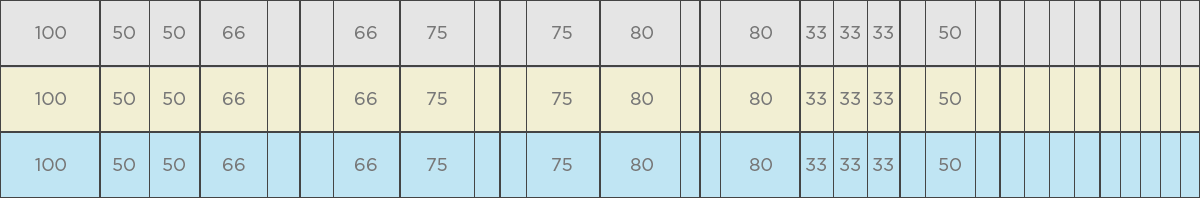
<style>
.page{position:relative;width:1200px;height:198px;background:#c0e5f3}
.page>*{position:absolute;margin:0}
.t1{font:18px "GothamBook";color:#777777}
</style>
<div class="page">
<p class="t1" style="left:35px;top:26px;width:31px;height:13px">100</p>
<p class="t1" style="left:113px;top:26px;width:22px;height:13px">50</p>
<p class="t1" style="left:163px;top:26px;width:22px;height:13px">50</p>
<p class="t1" style="left:223px;top:26px;width:22px;height:13px">66</p>
<p class="t1" style="left:355px;top:26px;width:22px;height:13px">66</p>
<p class="t1" style="left:427px;top:26px;width:20px;height:13px">75</p>
<p class="t1" style="left:552px;top:26px;width:20px;height:13px">75</p>
<p class="t1" style="left:631px;top:26px;width:22px;height:13px">80</p>
<p class="t1" style="left:750px;top:26px;width:22px;height:13px">80</p>
<p class="t1" style="left:806px;top:26px;width:20px;height:13px">33</p>
<p class="t1" style="left:840px;top:26px;width:20px;height:13px">33</p>
<p class="t1" style="left:873px;top:26px;width:20px;height:13px">33</p>
<p class="t1" style="left:939px;top:26px;width:22px;height:13px">50</p>
<p class="t1" style="left:35px;top:92px;width:31px;height:13px">100</p>
<p class="t1" style="left:113px;top:92px;width:22px;height:13px">50</p>
<p class="t1" style="left:163px;top:92px;width:22px;height:13px">50</p>
<p class="t1" style="left:223px;top:92px;width:22px;height:13px">66</p>
<p class="t1" style="left:355px;top:92px;width:22px;height:13px">66</p>
<p class="t1" style="left:427px;top:92px;width:20px;height:13px">75</p>
<p class="t1" style="left:552px;top:92px;width:20px;height:13px">75</p>
<p class="t1" style="left:631px;top:92px;width:22px;height:13px">80</p>
<p class="t1" style="left:750px;top:92px;width:22px;height:13px">80</p>
<p class="t1" style="left:806px;top:92px;width:20px;height:13px">33</p>
<p class="t1" style="left:840px;top:92px;width:20px;height:13px">33</p>
<p class="t1" style="left:873px;top:92px;width:20px;height:13px">33</p>
<p class="t1" style="left:939px;top:92px;width:22px;height:13px">50</p>
<p class="t1" style="left:35px;top:158px;width:31px;height:13px">100</p>
<p class="t1" style="left:113px;top:158px;width:22px;height:13px">50</p>
<p class="t1" style="left:163px;top:158px;width:22px;height:13px">50</p>
<p class="t1" style="left:223px;top:158px;width:22px;height:13px">66</p>
<p class="t1" style="left:355px;top:158px;width:22px;height:13px">66</p>
<p class="t1" style="left:427px;top:158px;width:20px;height:13px">75</p>
<p class="t1" style="left:552px;top:158px;width:20px;height:13px">75</p>
<p class="t1" style="left:631px;top:158px;width:22px;height:13px">80</p>
<p class="t1" style="left:750px;top:158px;width:22px;height:13px">80</p>
<p class="t1" style="left:806px;top:158px;width:20px;height:13px">33</p>
<p class="t1" style="left:840px;top:158px;width:20px;height:13px">33</p>
<p class="t1" style="left:873px;top:158px;width:20px;height:13px">33</p>
<p class="t1" style="left:939px;top:158px;width:22px;height:13px">50</p>
</div>
